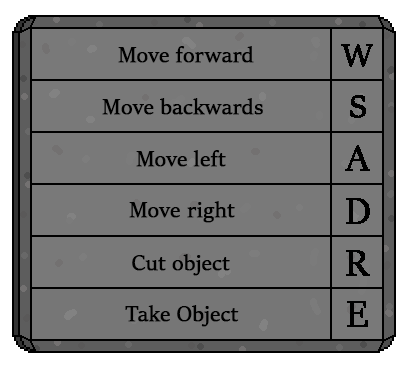
<style>
.page{position:relative;width:408px;height:368px;background:#797979}
.page>*{position:absolute;margin:0}
.t1{font:24px "SitkaBanner";color:#000000;font-weight:bold}
.t2{font:36.5px "SitkaBanner";color:#000000;font-weight:bold}
.t3{font:41.4px "SitkaBanner";color:#000000;font-weight:bold}
</style>
<div class="page">
<p class="t1" style="left:118px;top:46px;width:136px;height:17px">Move forward</p>
<p class="t2" style="left:341px;top:44px;width:32px;height:23px">W</p>
<p class="t1" style="left:102px;top:98px;width:161px;height:17px">Move backwards</p>
<p class="t2" style="left:350px;top:95px;width:16px;height:23px">S</p>
<p class="t1" style="left:136px;top:150px;width:90px;height:17px">Move left</p>
<p class="t3" style="left:345px;top:145px;width:25px;height:26px">A</p>
<p class="t3" style="left:346px;top:198px;width:24px;height:26px">D</p>
<p class="t1" style="left:129px;top:201px;width:106px;height:22px">Move right</p>
<p class="t1" style="left:132px;top:254px;width:98px;height:22px">Cut object</p>
<p class="t3" style="left:346px;top:250px;width:24px;height:26px">R</p>
<p class="t1" style="left:125px;top:305px;width:114px;height:22px">Take Object</p>
<p class="t3" style="left:347px;top:301px;width:21px;height:26px">E</p>
</div>
